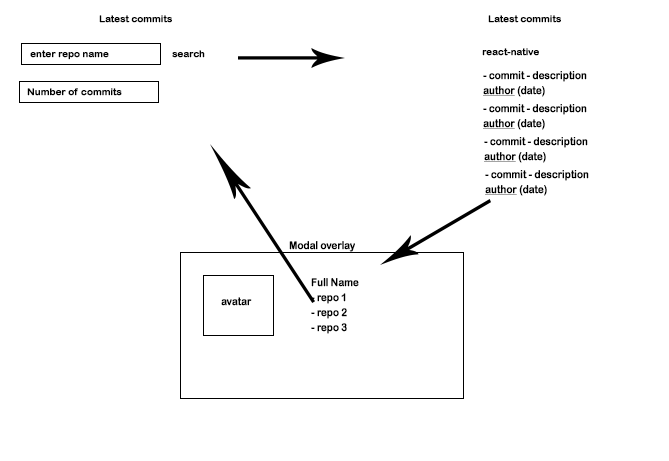
<style>
.page{position:relative;width:669px;height:461px;background:#ffffff}
.page>*{position:absolute;margin:0}
.t1{font:9.5px "ArialRoundedMTBold";letter-spacing:-0.035em;color:#000000;font-weight:bold;scale:1.06 1}
.t2{font:11px/15px "ArialRoundedMTBold";letter-spacing:-0.035em;color:#000000;font-weight:bold;scale:0.91 1}
.t3{font:11px/15px "ArialRoundedMTBold";letter-spacing:-0.035em;color:#000000;font-weight:bold;text-decoration:underline;scale:0.91 1}
.t4{font:11px "ArialRoundedMTBold";letter-spacing:-0.035em;color:#000000;font-weight:bold;scale:0.91 1}
</style>
<div class="page">
<p class="t1" style="left:99px;top:15px;width:73px;height:8px">Latest commits</p>
<p class="t1" style="left:488px;top:15px;width:73px;height:8px">Latest commits</p>
<p class="t1" style="left:30px;top:50px;width:79px;height:10px">enter repo name</p>
<p class="t1" style="left:172px;top:50px;width:33px;height:8px">search</p>
<p class="t1" style="left:482px;top:48px;width:57px;height:8px">react-native</p>
<p class="t2" style="left:483px;top:71px;width:104px;height:26px">- commit - description<br><span class="t3">author</span> (date)</p>
<p class="t1" style="left:27px;top:88px;width:95px;height:8px">Number of commits</p>
<p class="t2" style="left:483px;top:104px;width:104px;height:26px">- commit - description<br><span class="t3">author</span> (date)</p>
<p class="t2" style="left:484px;top:137px;width:104px;height:26px">- commit - description<br><span class="t3">author</span> (date)</p>
<p class="t2" style="left:485px;top:170px;width:104px;height:26px">- commit - description<br><span class="t3">author</span> (date)</p>
<p class="t4" style="left:289px;top:241px;width:66px;height:11px">Modal overlay</p>
<p class="t2" style="left:311px;top:278px;width:48px;height:56px">Full Name<br>- repo 1<br>- repo 2<br>- repo 3</p>
<p class="t4" style="left:221px;top:297px;width:31px;height:9px">avatar</p>
</div>
